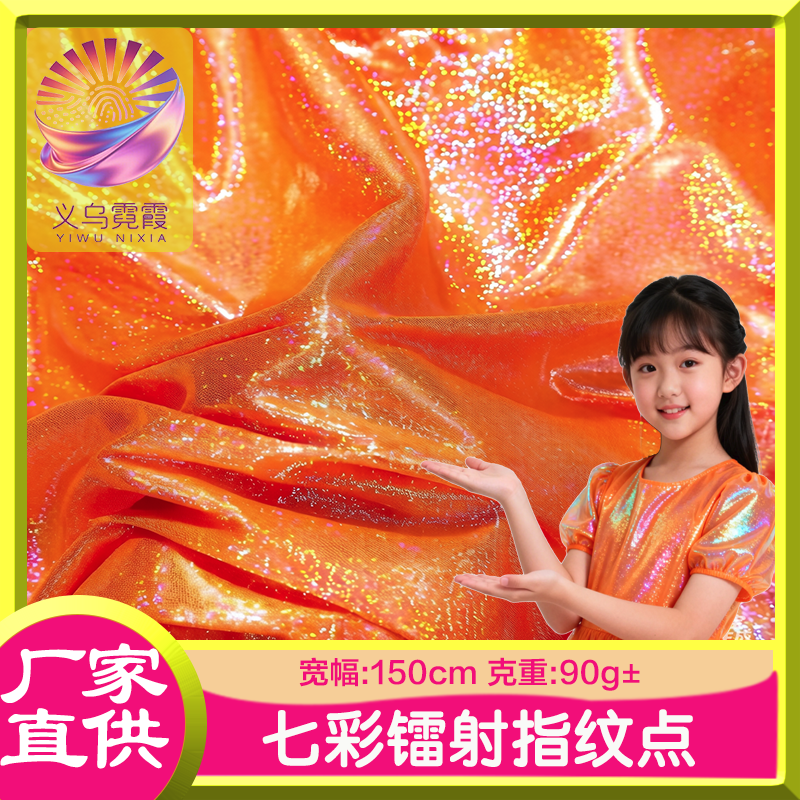
<style>
.page{position:relative;width:800px;height:800px}
.page>*{position:absolute;margin:0}
.t1{font:98.5px/18.6px "STBaoliSC-Regular";letter-spacing:-0.1em;color:#ffffff;scale:0.91 1}
.t2{font:98.5px/27px "STBaoliSC-Regular";letter-spacing:-0.1em;color:#ffffff;scale:0.91 1}
.t3{font:30px "FZLTZHK--GBK1-0";letter-spacing:0.02em;color:#f20e79}
.t4{font:30px "STXihei";letter-spacing:0.08em;color:#f20e79}
.t5{font:30px "FZLTZHK--GBK1-0";letter-spacing:0.08em;color:#f20e79}
.t6{font:60px "STYuanti-SC-Bold";letter-spacing:0.04em;color:#f9faf7}
</style>
<div class="page">
<p class="t1" style="left:0px;top:643px;width:169px;height:126px;text-align:center">厂家<br><br><span class="t2"><br>直供</span></p>
<p class="t3" style="left:299px;top:657px;width:341px;height:34px"><span class="t4">             </span>宽幅:150cm 克重:90g+</p>
<p class="t5" style="left:623px;top:680px;width:17px;height:3px">-</p>
<p class="t6" style="left:262px;top:709px;width:433px;height:59px">七彩镭射指纹点</p>
</div>
